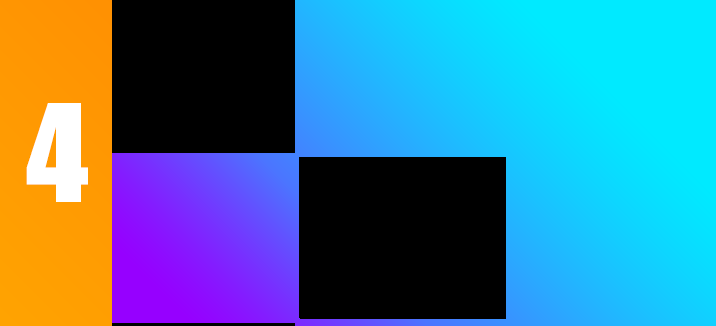
<style>
.page{position:relative;width:716px;height:326px;background:#000000}
.page>*{position:absolute;margin:0}
.t1{font:125px "Impact";color:#ffffff}
</style>
<div class="page">
<p class="t1" style="left:26px;top:103px;width:62px;height:99px">4</p>
</div>
